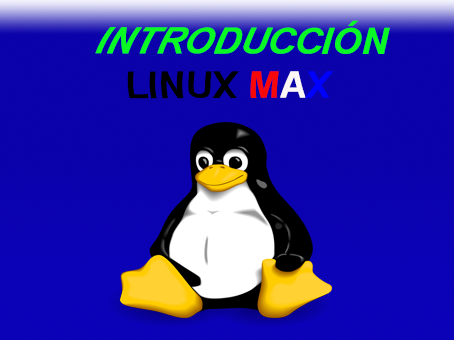
<style>
.page{position:relative;width:454px;height:340px}
.page>*{position:absolute;margin:0}
.t1{font:36px "Arial-BoldItalicMT";color:#09f925}
.t2{font:36px "Arial-BoldItalicMT";color:#000000}
.t3{font:36px "Arial-BoldItalicMT";color:#f70808}
.t4{font:36px "Arial-BoldItalicMT";color:#fcf7f7}
.t5{font:36px "Arial-BoldItalicMT";color:#0000ff}
</style>
<div class="page">
<p class="t1" style="left:95px;top:20px;width:295px;height:79px;text-align:center"><span class="t2">      </span>INTRODUCCIÓN  <br><span class="t2"> LINUX </span><span class="t3">M</span><span class="t4">A</span><span class="t5">X</span></p>
</div>
